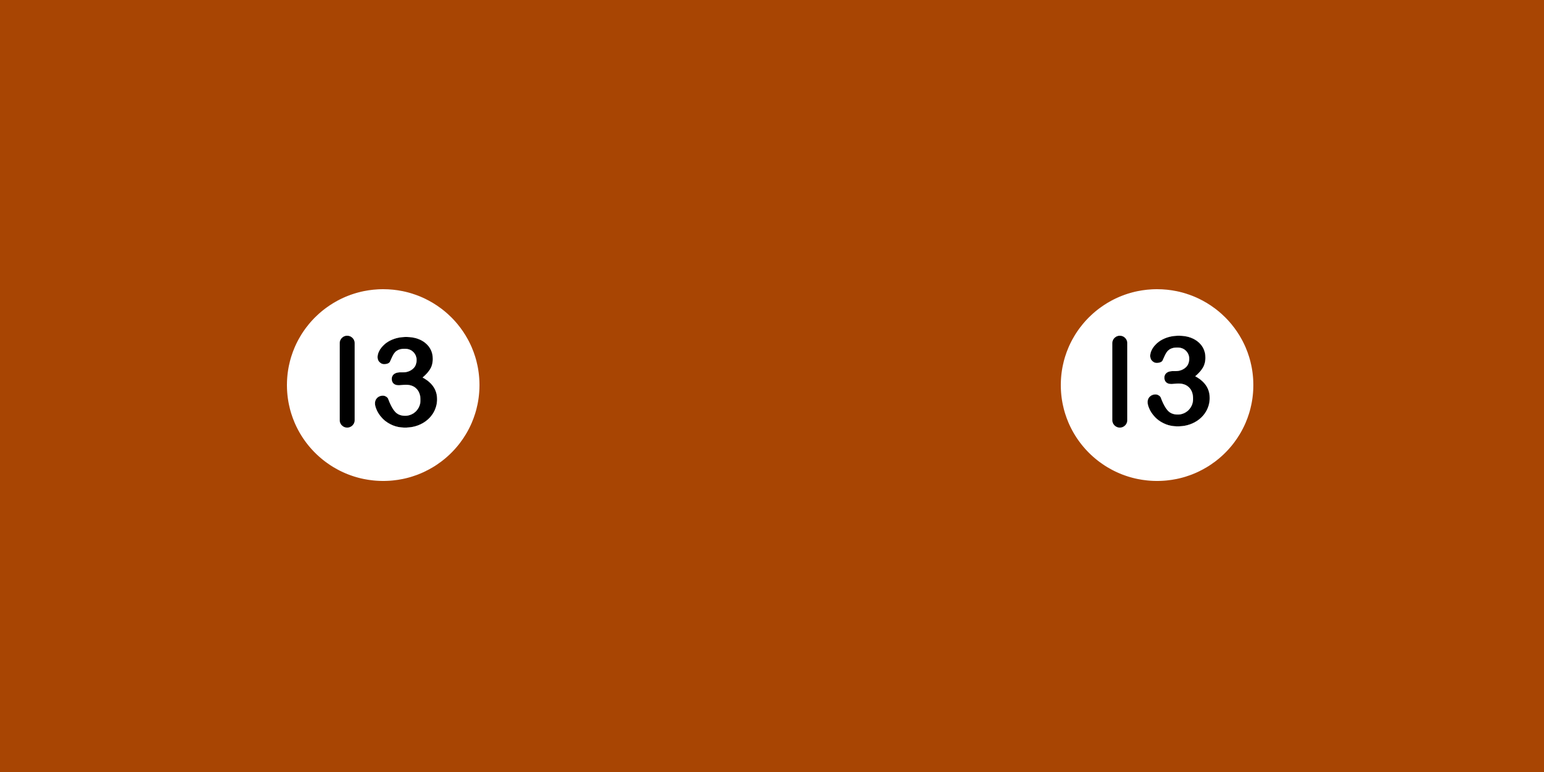
<style>
.page{position:relative;width:1544px;height:772px;background:#a84503}
.page>*{position:absolute;margin:0}
.t1{font:124.2px "ArialRoundedMTBold";letter-spacing:-0.025em;color:#000000}
</style>
<div class="page">
<p class="t1" style="left:374px;top:337px;width:63px;height:91px">3</p>
<p class="t1" style="left:1147px;top:336px;width:63px;height:91px">3</p>
</div>
